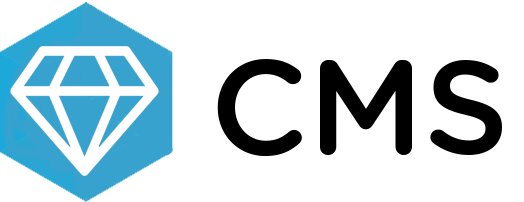
<style>
.page{position:relative;width:524px;height:202px;background:#ffffff}
.page>*{position:absolute;margin:0}
.t1{font:133.3px "GothamRounded-Medium";color:#000000}
</style>
<div class="page">
<p class="t1" style="left:217px;top:59px;width:285px;height:98px">CMS</p>
</div>
